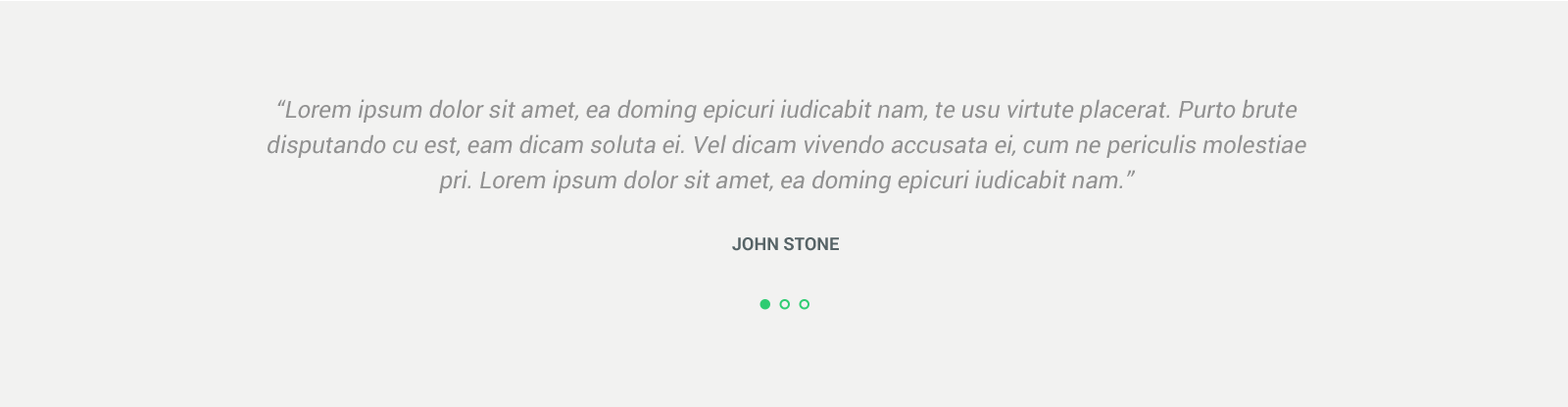
<style>
.page{position:relative;width:1568px;height:407px;background:#f2f2f1}
.page>*{position:absolute;margin:0}
.t1{font:23.5px/35.3px "Roboto-Regular";color:#919191;font-style:italic}
.t2{font:17.6px "Roboto-Bold";color:#566366;text-transform:uppercase}
</style>
<div class="page">
<p class="t1" style="left:268px;top:99px;width:1038px;height:94px;text-align:center">“Lorem ipsum dolor sit amet, ea doming epicuri iudicabit nam, te usu virtute placerat. Purto brute disputando cu est, eam dicam soluta ei. Vel dicam vivendo accusata ei, cum ne periculis molestiae pri. Lorem ipsum dolor sit amet, ea doming epicuri iudicabit nam.”</p>
<p class="t2" style="left:732px;top:237px;width:107px;height:14px">John Stone</p>
</div>
